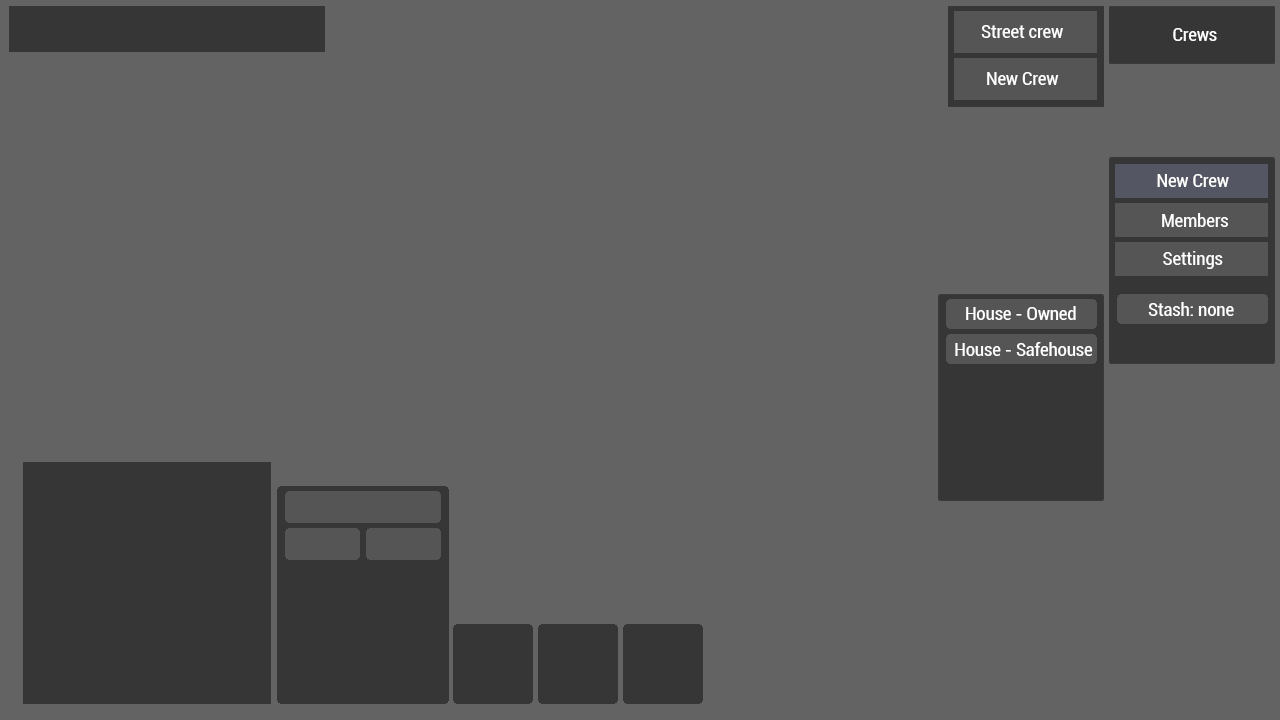
<style>
.page{position:relative;width:1280px;height:720px;background:#636363}
.page>*{position:absolute;margin:0}
.t1{font:18.6px "Roboto-Condensed";color:#ffffff}
</style>
<div class="page">
<p class="t1" style="left:981px;top:25px;width:82px;height:13px">Street crew</p>
<p class="t1" style="left:1173px;top:28px;width:44px;height:13px">Crews</p>
<p class="t1" style="left:987px;top:72px;width:72px;height:13px">New Crew</p>
<p class="t1" style="left:1157px;top:174px;width:72px;height:13px">New Crew</p>
<p class="t1" style="left:1162px;top:213px;width:66px;height:14px">Members</p>
<p class="t1" style="left:1163px;top:251px;width:60px;height:18px">Settings</p>
<p class="t1" style="left:1148px;top:302px;width:86px;height:14px">Stash: none</p>
<p class="t1" style="left:966px;top:306px;width:110px;height:14px">House - Owned</p>
<p class="t1" style="left:955px;top:342px;width:138px;height:14px">House - Safehouse</p>
</div>
